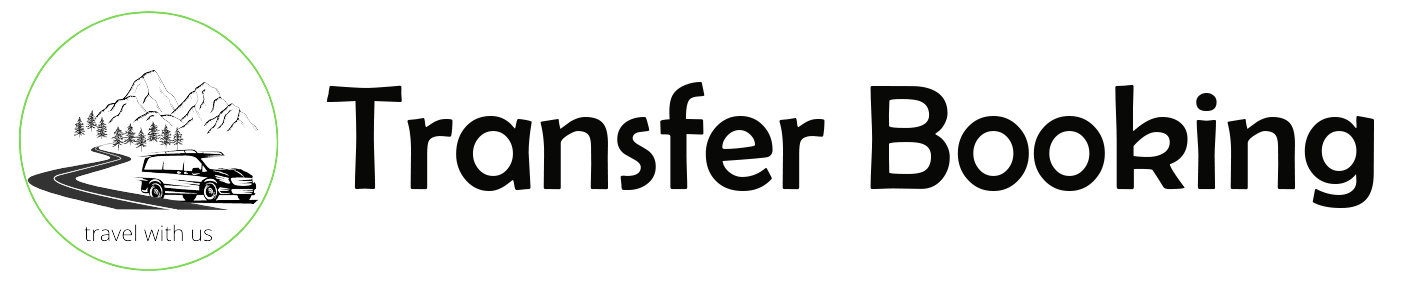
<style>
.page{position:relative;width:1418px;height:284px;background:#ffffff}
.page>*{position:absolute;margin:0}
.t1{font:150px "BerlinSansFB-Reg";color:#080906}
</style>
<div class="page">
<p class="t1" style="left:326px;top:82px;width:1048px;height:126px">Transfer Booking</p>
</div>
